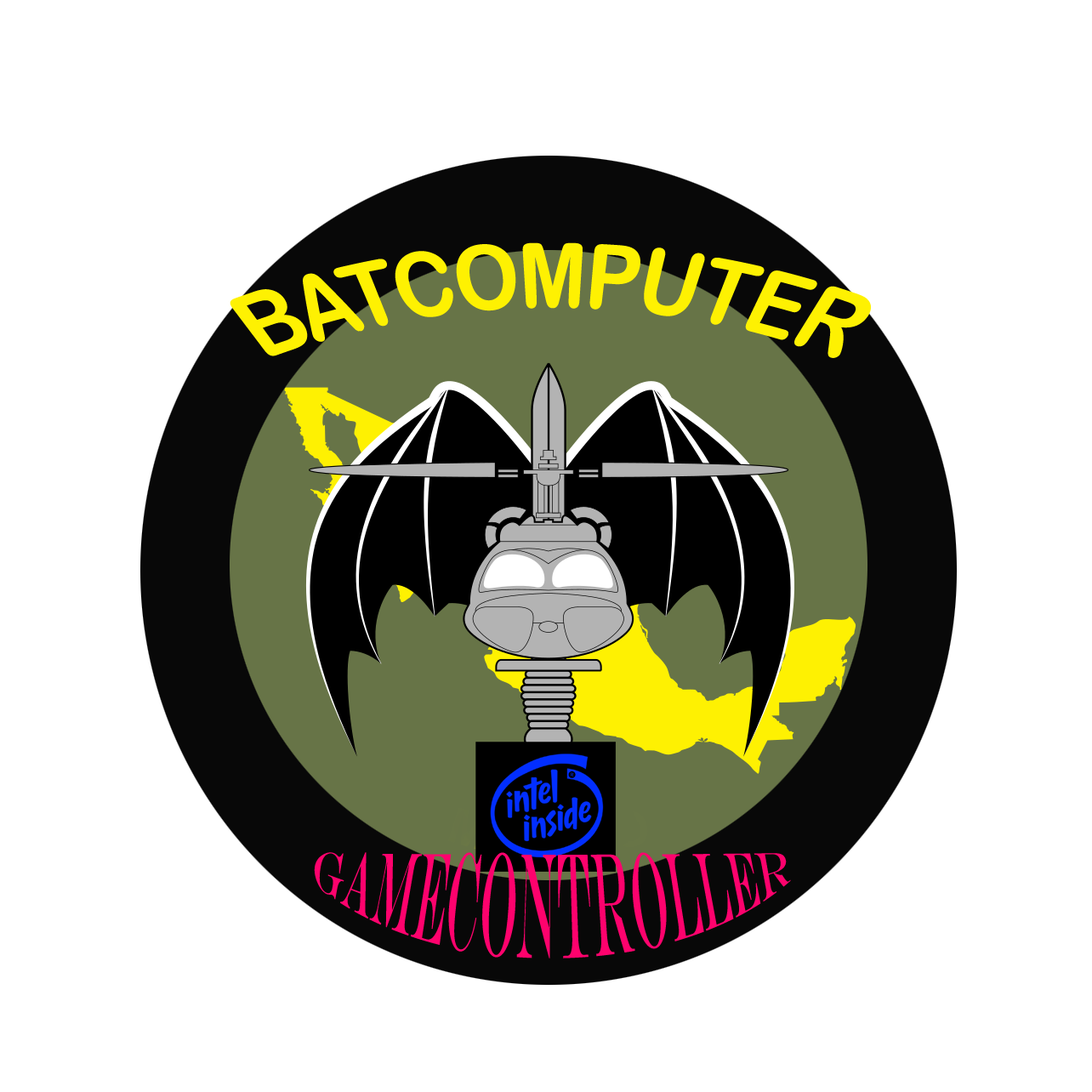
<style>
.page{position:relative;width:1092px;height:1092px;background:#ffffff}
.page>*{position:absolute;margin:0}
.t1{font:61.2px "ArialRoundedMTBold";color:#fef102}
.t2{font:33.1px "EngraversMT";color:#fe026d;scale:1.11 1}
</style>
<div class="page">
<p class="t1" style="left:230px;top:242px;width:641px;height:116px;text-align:center">BATCOMPUTER</p>
<p class="t2" style="left:314px;top:852px;width:477px;height:106px;text-align:center">GAMECONTROLLER</p>
</div>
